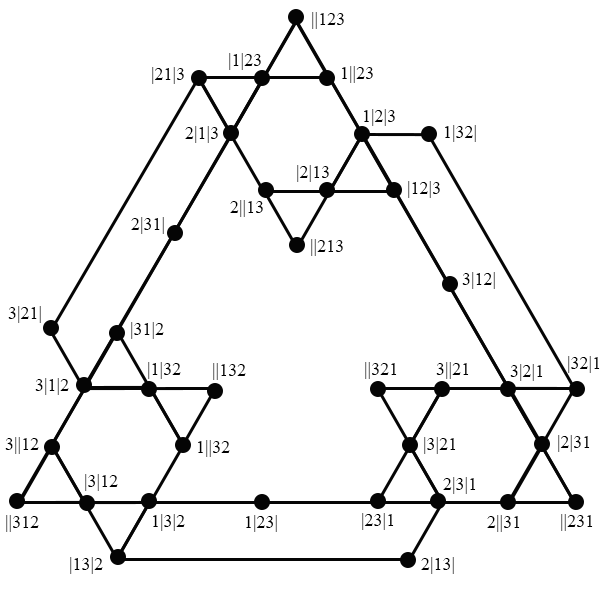
<style>
.page{position:relative;width:600px;height:600px;background:#ffffff}
.page>*{position:absolute;margin:0}
.t1{font:18px "TimesNewRomanPSMT";color:#000000}
</style>
<div class="page">
<p class="t1" style="left:312px;top:12px;width:32px;height:17px">||123</p>
<p class="t1" style="left:229px;top:53px;width:32px;height:17px">|1|23</p>
<p class="t1" style="left:152px;top:67px;width:32px;height:17px">|21|3</p>
<p class="t1" style="left:342px;top:66px;width:31px;height:17px">1||23</p>
<p class="t1" style="left:364px;top:109px;width:31px;height:17px">1|2|3</p>
<p class="t1" style="left:185px;top:126px;width:33px;height:17px">2|1|3</p>
<p class="t1" style="left:445px;top:125px;width:31px;height:17px">1|32|</p>
<p class="t1" style="left:297px;top:165px;width:32px;height:17px">|2|13</p>
<p class="t1" style="left:408px;top:181px;width:32px;height:17px">|12|3</p>
<p class="t1" style="left:230px;top:200px;width:33px;height:17px">2||13</p>
<p class="t1" style="left:131px;top:217px;width:33px;height:17px">2|31|</p>
<p class="t1" style="left:311px;top:239px;width:32px;height:17px">||213</p>
<p class="t1" style="left:462px;top:272px;width:33px;height:17px">3|12|</p>
<p class="t1" style="left:8px;top:306px;width:33px;height:17px">3|21|</p>
<p class="t1" style="left:131px;top:322px;width:33px;height:17px">|31|2</p>
<p class="t1" style="left:148px;top:362px;width:33px;height:17px">|1|32</p>
<p class="t1" style="left:213px;top:363px;width:33px;height:17px">||132</p>
<p class="t1" style="left:365px;top:362px;width:32px;height:17px">||321</p>
<p class="t1" style="left:436px;top:362px;width:33px;height:17px">3||21</p>
<p class="t1" style="left:510px;top:364px;width:33px;height:17px">3|2|1</p>
<p class="t1" style="left:568px;top:356px;width:32px;height:17px">|32|1</p>
<p class="t1" style="left:35px;top:378px;width:34px;height:17px">3|1|2</p>
<p class="t1" style="left:5px;top:437px;width:34px;height:17px">3||12</p>
<p class="t1" style="left:424px;top:437px;width:32px;height:17px">|3|21</p>
<p class="t1" style="left:558px;top:435px;width:32px;height:17px">|2|31</p>
<p class="t1" style="left:198px;top:440px;width:32px;height:17px">1||32</p>
<p class="t1" style="left:85px;top:474px;width:33px;height:17px">|3|12</p>
<p class="t1" style="left:443px;top:477px;width:33px;height:17px">2|3|1</p>
<p class="t1" style="left:6px;top:515px;width:33px;height:17px">||312</p>
<p class="t1" style="left:153px;top:514px;width:32px;height:17px">1|3|2</p>
<p class="t1" style="left:246px;top:515px;width:31px;height:17px">1|23|</p>
<p class="t1" style="left:362px;top:513px;width:32px;height:17px">|23|1</p>
<p class="t1" style="left:487px;top:515px;width:33px;height:17px">2||31</p>
<p class="t1" style="left:561px;top:514px;width:32px;height:17px">||231</p>
<p class="t1" style="left:70px;top:557px;width:33px;height:17px">|13|2</p>
<p class="t1" style="left:421px;top:557px;width:33px;height:17px">2|13|</p>
</div>
